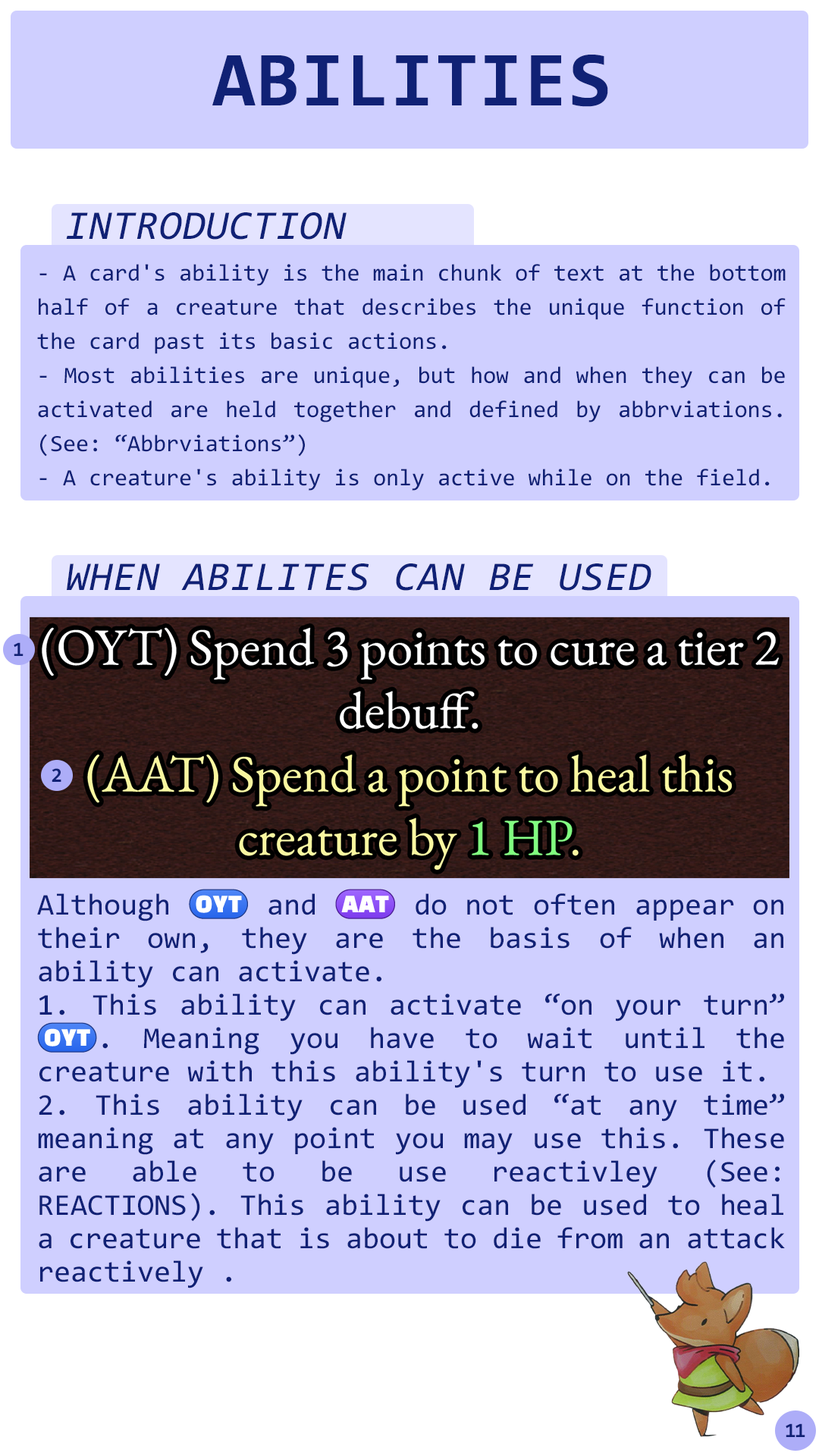
<style>
.page{position:relative;width:819px;height:1456px;background:#cfcfff}
.page>*{position:absolute;margin:0}
.t1{font:78.3px "Consolas-Bold";letter-spacing:0.02em;color:#102175}
.t2{font:41.1px "Consolas-Italic";letter-spacing:0.02em;color:#102175}
.t3{font:23.5px/34.1px "Consolas";color:#102175}
.t4{font:20.5px "Consolas-Bold";color:#102175}
.t5{font:30.3px/33.4px "Consolas";color:#102175}
.t6{font:30.3px/33.4px "stoogedings-Regular";color:#102175}
.t7{font:20.5px "Consolas-Bold";letter-spacing:-0.06em;color:#102175}
.t8{font:20.5px "Consolas-Bold";letter-spacing:-0.2em;color:#102175}
</style>
<div class="page">
<p class="t1" style="left:212px;top:55px;width:396px;height:52px">ABILITIES</p>
<p class="t2" style="left:66px;top:212px;width:281px;height:28px">INTRODUCTION</p>
<p class="t3" style="left:37px;top:264px;width:749px;height:227px;text-align:justify">- A card's ability is the main chunk of text at the bottom half of a creature that describes the unique function of the card past its basic actions. <br>- Most abilities are unique, but how and when they can be activated are held together and defined by abbrviations. (See: “Abbrviations”)<br>- A creature's ability is only active while on the field.</p>
<p class="t2" style="left:67px;top:563px;width:584px;height:28px">WHEN ABILITES CAN BE USED</p>
<p class="t4" style="left:14px;top:642px;width:10px;height:14px">1</p>
<p class="t4" style="left:52px;top:768px;width:9px;height:14px">2</p>
<p class="t5" style="left:37px;top:889px;width:748px;height:399px;text-align:justify">Although <span class="t6">(OYT)</span> and <span class="t6">(AAT)</span> do not often appear on their own, they are the basis of when an ability can activate.<br>1. This ability can activate “on your turn” <span class="t6">(OYT)</span>. Meaning you have to wait until the creature with this ability's turn to use it.<br>2. This ability can be used “at any time” meaning at any point you may use this. These are able to be use reactivley (See: REACTIONS). This ability can be used to heal a creature that is about to die from an attack reactively .</p>
<p class="t7" style="left:786px;top:1423px;width:19px;height:14px">1<span class="t8">1</span></p>
</div>
